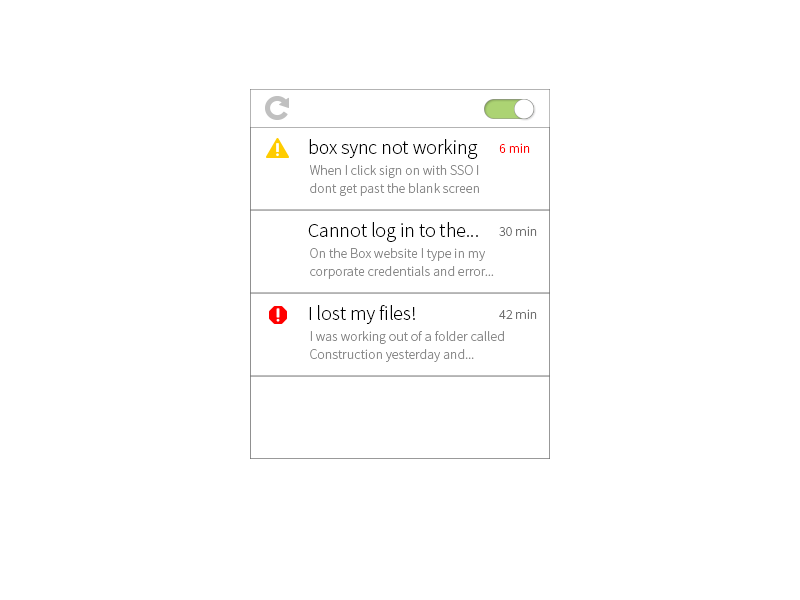
<style>
.page{position:relative;width:800px;height:600px;background:#ffffff}
.page>*{position:absolute;margin:0}
.t1{font:19.9px "SourceSansPro-Light";color:#000000}
.t2{font:14px "SourceSansPro-Light";color:#ff0000}
.t3{font:14px/18px "SourceSansPro-Light";color:#8b8b8b}
.t4{font:14px "SourceSansPro-Light";color:#6f6f6f}
</style>
<div class="page">
<p class="t1" style="left:309px;top:139px;width:169px;height:20px">box sync not working</p>
<p class="t2" style="left:499px;top:143px;width:31px;height:10px">6 min</p>
<p class="t3" style="left:310px;top:165px;width:169px;height:31px">When I click sign on with SSO I dont get past the blank screen screenshot here</p>
<p class="t1" style="left:308px;top:222px;width:170px;height:20px">Cannot log in to the...</p>
<p class="t4" style="left:499px;top:226px;width:38px;height:10px">30 min</p>
<p class="t3" style="left:310px;top:248px;width:184px;height:31px">On the Box website I type in my corporate credentials and error...</p>
<p class="t1" style="left:309px;top:305px;width:106px;height:19px">I lost my files!</p>
<p class="t4" style="left:499px;top:309px;width:38px;height:10px">42 min</p>
<p class="t3" style="left:310px;top:331px;width:194px;height:31px">I was working out of a folder called Construction yesterday and...</p>
</div>
